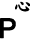
<style>
.page{position:relative;width:30px;height:39px;background:#ffffff}
.page>*{position:absolute;margin:0}
.t1{font:18px "DFKaiShu-SB-Estd-BF";color:#000000;font-weight:bold}
.t2{font:27px "ArialMT";color:#000000;font-weight:bold}
</style>
<div class="page">
<p class="t1" style="left:15px;top:1px;width:15px;height:11px">心</p>
<p class="t2" style="left:0px;top:18px;width:16px;height:21px">P</p>
</div>
